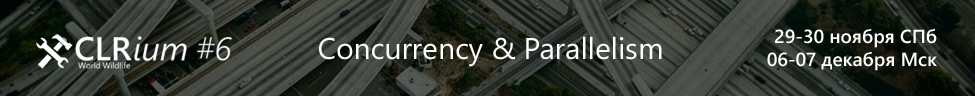
<style>
.page{position:relative;width:975px;height:96px}
.page>*{position:absolute;margin:0}
.t1{font:19px "SegoeUI-SemiBold";color:#ffffff}
.t2{font:30px "SegoeUI";color:#fdfdfd}
</style>
<div class="page">
<p class="t1" style="left:767px;top:28px;width:170px;height:43px;text-align:right">29-30 ноября СПб<br>06-07 декабря Мск</p>
<p class="t2" style="left:319px;top:36px;width:343px;height:31px">Concurrency &amp; Parallelism</p>
</div>
